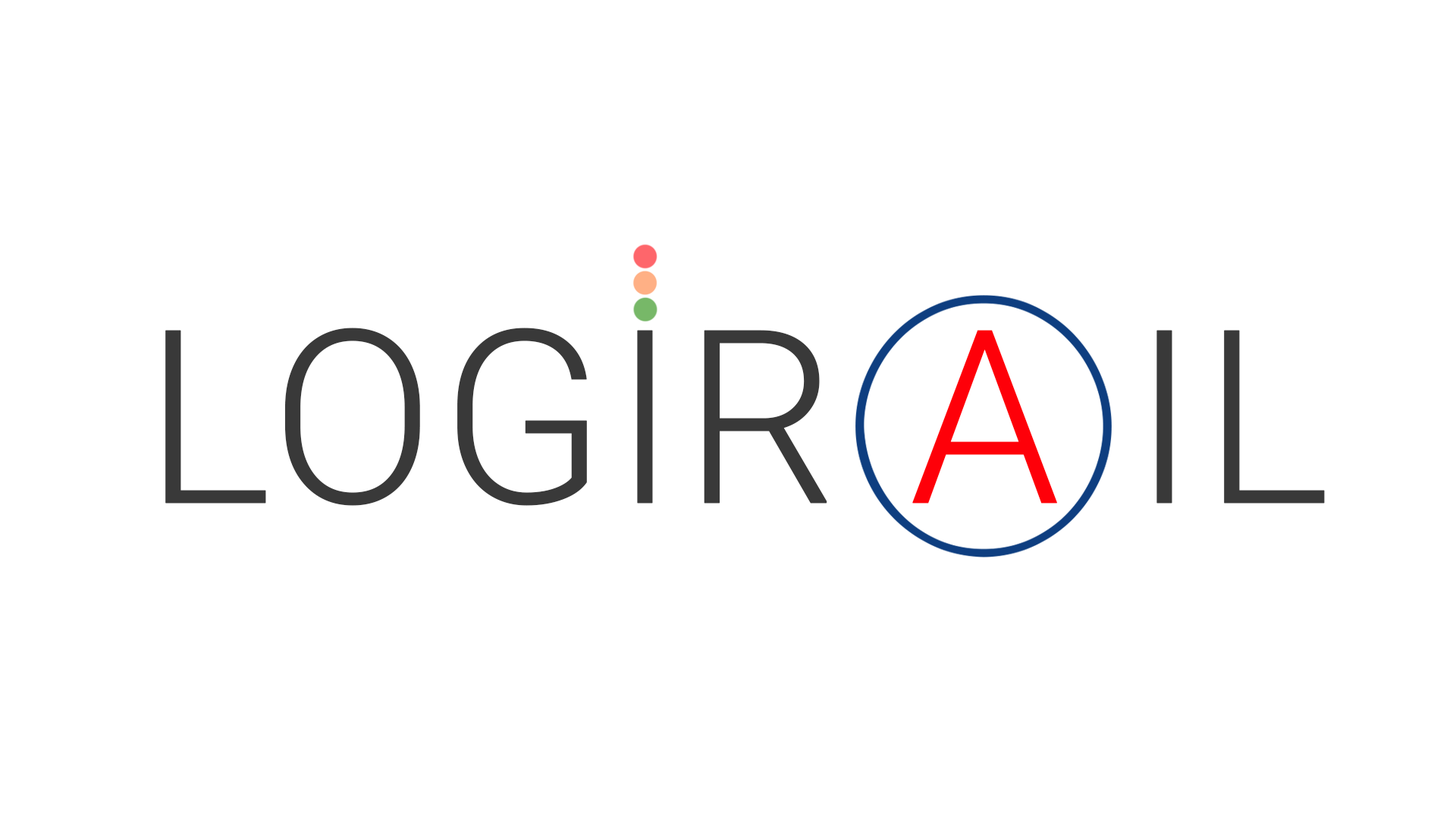
<style>
.page{position:relative;width:1456px;height:819px;background:#ffffff}
.page>*{position:absolute;margin:0}
.t1{font:241.7px "Roboto-Light";color:#393939;font-weight:bold}
.t2{font:241.7px "Roboto-Light";color:#fe0009;font-weight:bold}
</style>
<div class="page">
<p class="t1" style="left:165px;top:328px;width:1160px;height:178px">LOGIR <span class="t2">A</span> IL</p>
</div>
